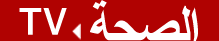
<style>
.page{position:relative;width:219px;height:41px;background:#b00201}
.page>*{position:absolute;margin:0}
.t1{font:54.9px "Arial-BoldMT";letter-spacing:-0.04em;color:#ffffff}
.t2{font:37.5px "HelveticaNeueLTCom-Md";letter-spacing:0.06em;color:#ffffff}
.t3{font:37.5px "HelveticaNeueLTCom-Md";color:#ffffff}
</style>
<div class="page">
<p class="t1" style="left:90px;top:0px;width:108px;height:42px">ﺔﺤﺼﻟﺍ</p>
<p class="t2" style="left:19px;top:8px;width:48px;height:27px">T<span class="t3">V</span></p>
</div>
